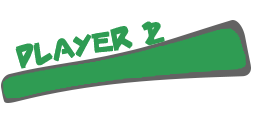
<style>
.page{position:relative;width:256px;height:128px;background:#ffffff}
.page>*{position:absolute;margin:0}
.t1{font:30px "SharkMadeInJapan";color:#2f9c53}
</style>
<div class="page">
<p class="t1" style="left:15px;top:21px;width:140px;height:48px;rotate:-11deg">Player 1</p>
<p class="t1" style="left:16px;top:22px;width:149px;height:45px;rotate:-9deg">Player 2</p>
</div>
